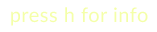
<style>
.page{position:relative;width:157px;height:32px;background:#ffffff}
.page>*{position:absolute;margin:0}
.t1{font:20px "Lato-Regular";letter-spacing:0.025em;color:#f4ffa8}
</style>
<div class="page">
<p class="t1" style="left:11px;top:7px;width:137px;height:19px">press h for info</p>
</div>
